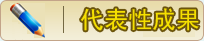
<style>
.page{position:relative;width:204px;height:41px}
.page>*{position:absolute;margin:0}
.t1{font:24px "SimHei";color:#f5e000}
</style>
<div class="page">
<p class="t1" style="left:81px;top:8px;width:118px;height:23px">代表性成果</p>
</div>
